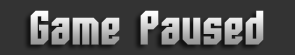
<style>
.page{position:relative;width:295px;height:55px;background:#333333}
.page>*{position:absolute;margin:0}
.t1{font:48px "Whitestone-Bold"}
</style>
<div class="page">
<p class="t1" style="left:30px;top:10px;width:234px;height:35px">Game Paused</p>
</div>
